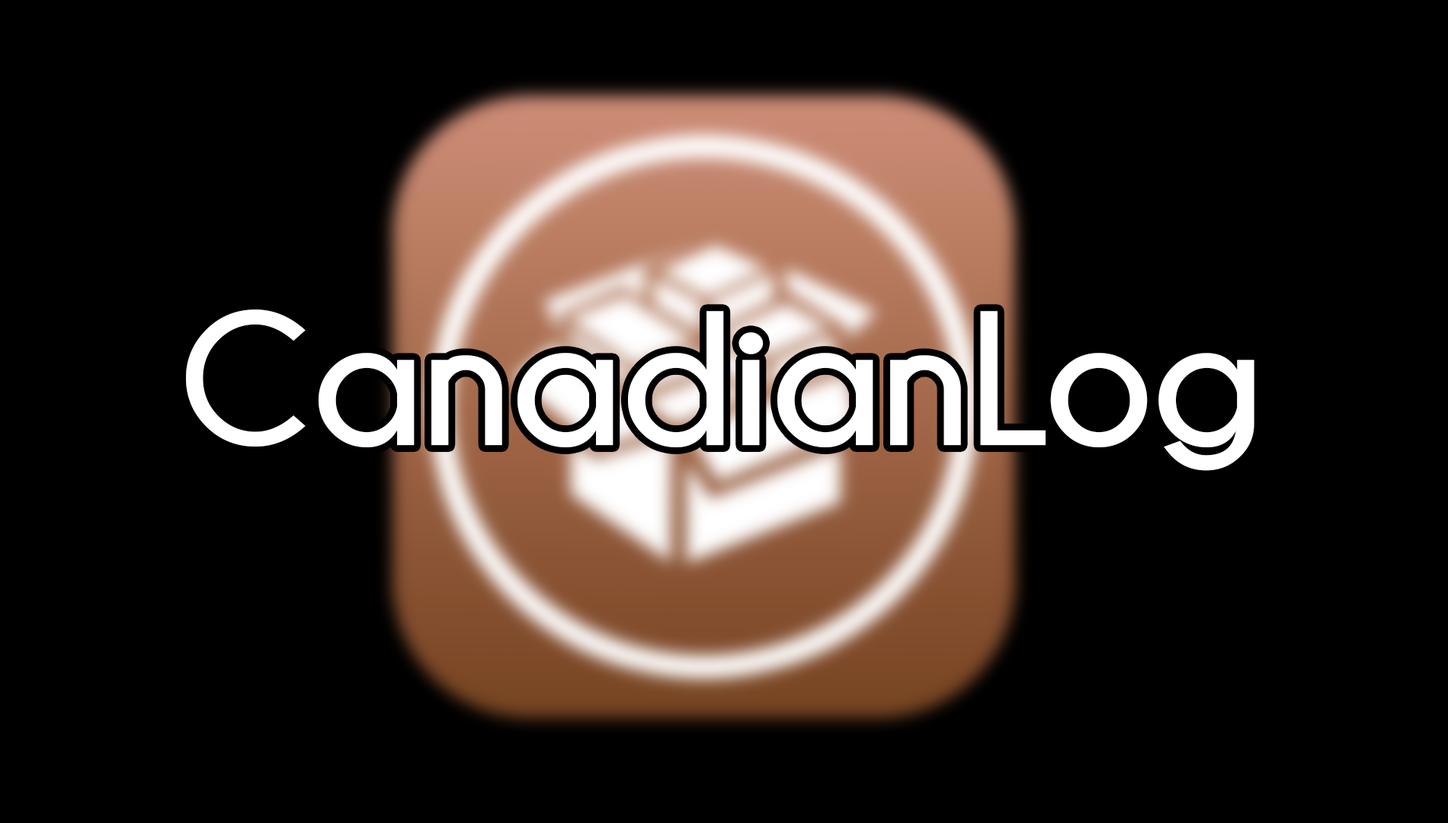
<style>
.page{position:relative;width:1448px;height:823px;background:#000000}
.page>*{position:absolute;margin:0}
.t1{font:190.6px "Champagne&Limousines-Bold";color:#ffffff}
</style>
<div class="page">
<p class="t1" style="left:186px;top:309px;width:1069px;height:162px">CanadianLog</p>
</div>
